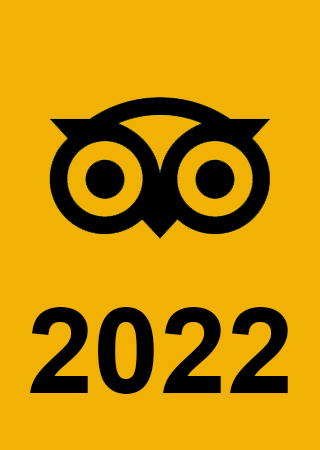
<style>
.page{position:relative;width:320px;height:450px;background:#f2b203}
.page>*{position:absolute;margin:0}
.t1{font:120px "Arial-BoldMT";color:#000000}
</style>
<div class="page">
<p class="t1" style="left:30px;top:307px;width:258px;height:87px">2022</p>
</div>
